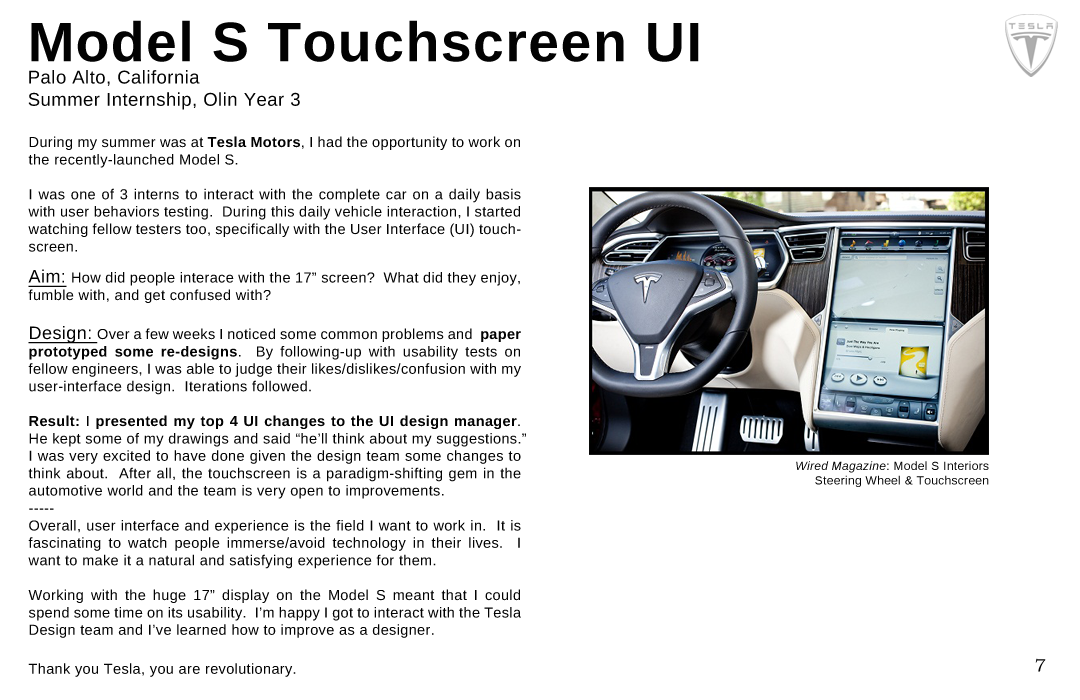
<style>
.page{position:relative;width:1080px;height:700px;background:#ffffff}
.page>*{position:absolute;margin:0}
.t1{font:18.5px "LiberationSans";letter-spacing:0.025em;color:#020202}
.t2{font:55.6px "LiberationSans-Bold";letter-spacing:0.025em;color:#020202}
.t3{font:14.5px "LiberationSans";letter-spacing:0.025em;color:#020202}
.t4{font:14.5px "LiberationSans-Bold";letter-spacing:0.025em;color:#020202}
.t5{font:18px "LiberationSans";letter-spacing:0.025em;color:#020202;text-decoration:underline}
.t6{font:12px "LiberationSans";letter-spacing:0.025em;color:#040404}
.t7{font:12px "LiberationSans-Italic";letter-spacing:0.025em;color:#040404}
.t8{font:18px "BookmanOldStyle";letter-spacing:0.025em;color:#020202}
</style>
<div class="page">
<p class="t1" style="left:28px;top:20px;width:671px;height:90px;text-align:justify"><span class="t2">Model S Touchscreen UI<br></span>Palo Alto, California<br>Summer Internship, Olin Year 3</p>
<p class="t3" style="left:28px;top:136px;width:498px;height:541px;text-align:justify">During my summer was at <span class="t4">Tesla Motors</span>, I had the opportunity to work on the recently-launched Model S.<br><br>I was one of 3 interns to interact with the complete car on a daily basis with user behaviors testing.  During this daily vehicle interaction, I started watching fellow testers too, specifically with the User Interface (UI) touchscreen.  <br><br><span class="t5">Aim: </span>How did people interace with the 17” screen?  What did they enjoy, fumble with, and get confused with?<br><br><span class="t5">Design: </span>Over a few weeks I noticed some common problems and  <span class="t4">paper prototyped some re-designs</span>.  By following-up with usability tests on fellow engineers, I was able to judge their likes/dislikes/confusion with my user-interface design.  Iterations followed.<br><br><span class="t4">Result: </span>I <span class="t4">presented my top 4 UI changes to the UI design manager</span>.  He kept some of my drawings and said “he’ll think about my suggestions.”  <br>I was very excited to have done given the design team some changes to think about.  After all, the touchscreen is a paradigm-shifting gem in the automotive world and the team is very open to improvements.<br>-----<br>Overall, user interface and experience is the field I want to work in.  It is fascinating to watch people immerse/avoid technology in their lives.  I want to make it a natural and satisfying experience for them.<br><br>Working with the huge 17” display on the Model S meant that I could spend some time on its usability.  I’m happy I got to interact with the Tesla Design team and I’ve learned how to improve as a designer.<br><br>Thank you Tesla, you are revolutionary.</p>
<p class="t6" style="left:796px;top:461px;width:193px;height:26px;text-align:right"><span class="t7">Wired Magazine</span>: Model S Interiors<br>Steering Wheel &amp; Touchscreen</p>
<p class="t8" style="left:1035px;top:658px;width:11px;height:14px">7</p>
</div>
